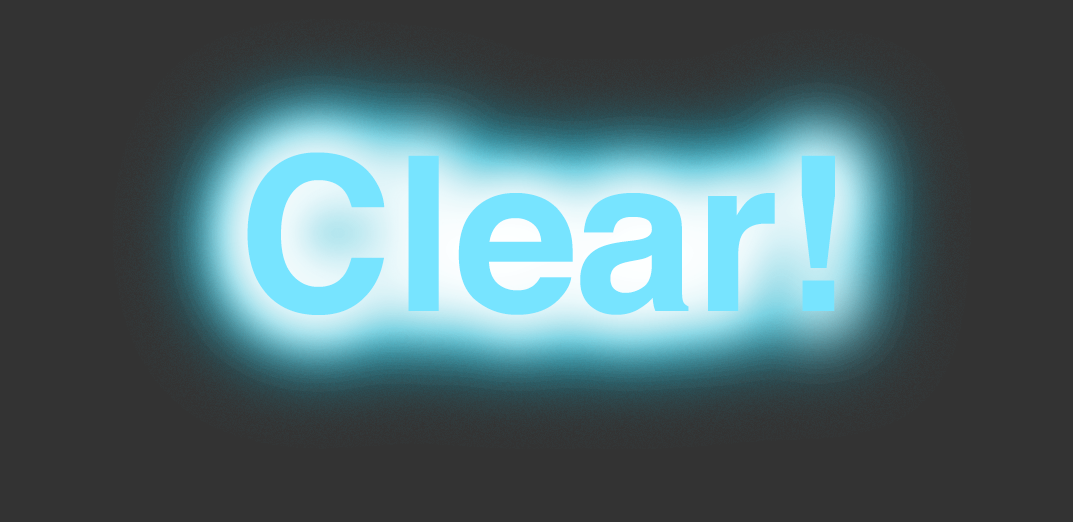
<style>
.page{position:relative;width:1073px;height:522px;background:#333333}
.page>*{position:absolute;margin:0}
.t1{font:216px "Helvetica-Bold";color:#77e4ff}
</style>
<div class="page">
<p class="t1" style="left:247px;top:152px;width:588px;height:163px">Clear!</p>
</div>
